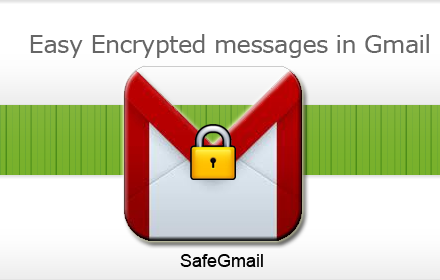
<style>
.page{position:relative;width:440px;height:280px;background:#ffffff}
.page>*{position:absolute;margin:0}
.t1{font:24px "Verdana";letter-spacing:-0.025em;color:#666666}
.t2{font:18px "ArialMT";color:#000000}
</style>
<div class="page">
<p class="t1" style="left:30px;top:34px;width:399px;height:24px">Easy Encrypted messages in Gmail</p>
<p class="t2" style="left:180px;top:254px;width:83px;height:13px">SafeGmail</p>
</div>
